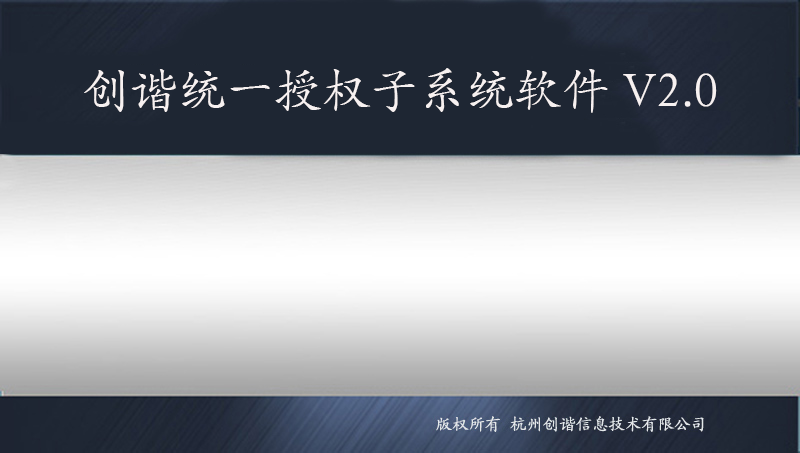
<style>
.page{position:relative;width:800px;height:453px;background:#1e2633}
.page>*{position:absolute;margin:0}
.t1{font:48px "SIL-Kai-Reg-Jian";color:#f7f1f1}
</style>
<div class="page">
<p class="t1" style="left:84px;top:68px;width:633px;height:45px">创谐统一授权子系统软件V2.0</p>
</div>
